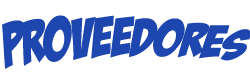
<style>
.page{position:relative;width:250px;height:80px;background:#ffffff}
.page>*{position:absolute;margin:0}
.t1{font:53.3px "BadaBoomBB";color:#1d46af}
</style>
<div class="page">
<p class="t1" style="left:2px;top:15px;width:249px;height:54px">Proveedores</p>
</div>
